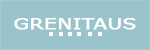
<style>
.page{position:relative;width:150px;height:50px;background:#9ac4cc}
.page>*{position:absolute;margin:0}
.t1{font:15.3px "MSReferenceSansSerif";color:#ffffff;text-transform:uppercase;font-weight:bold;scale:1.3 1}
</style>
<div class="page">
<p class="t1" style="left:14px;top:18px;width:122px;height:12px">grenitaus</p>
</div>
